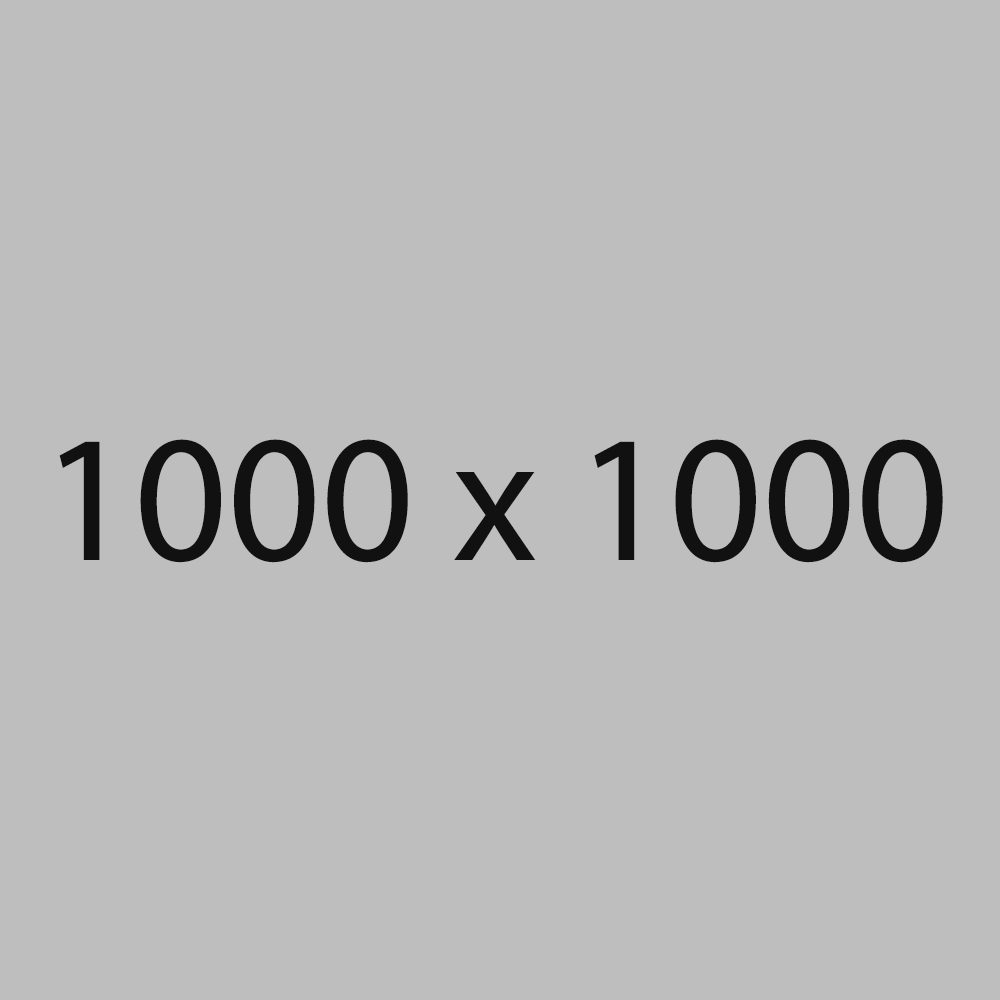
<style>
.page{position:relative;width:1000px;height:1000px;background:#bebebe}
.page>*{position:absolute;margin:0}
.t1{font:182px "MyriadPro-Regular";color:#111111}
</style>
<div class="page">
<p class="t1" style="left:59px;top:439px;width:884px;height:124px">1000 x 1000</p>
</div>
